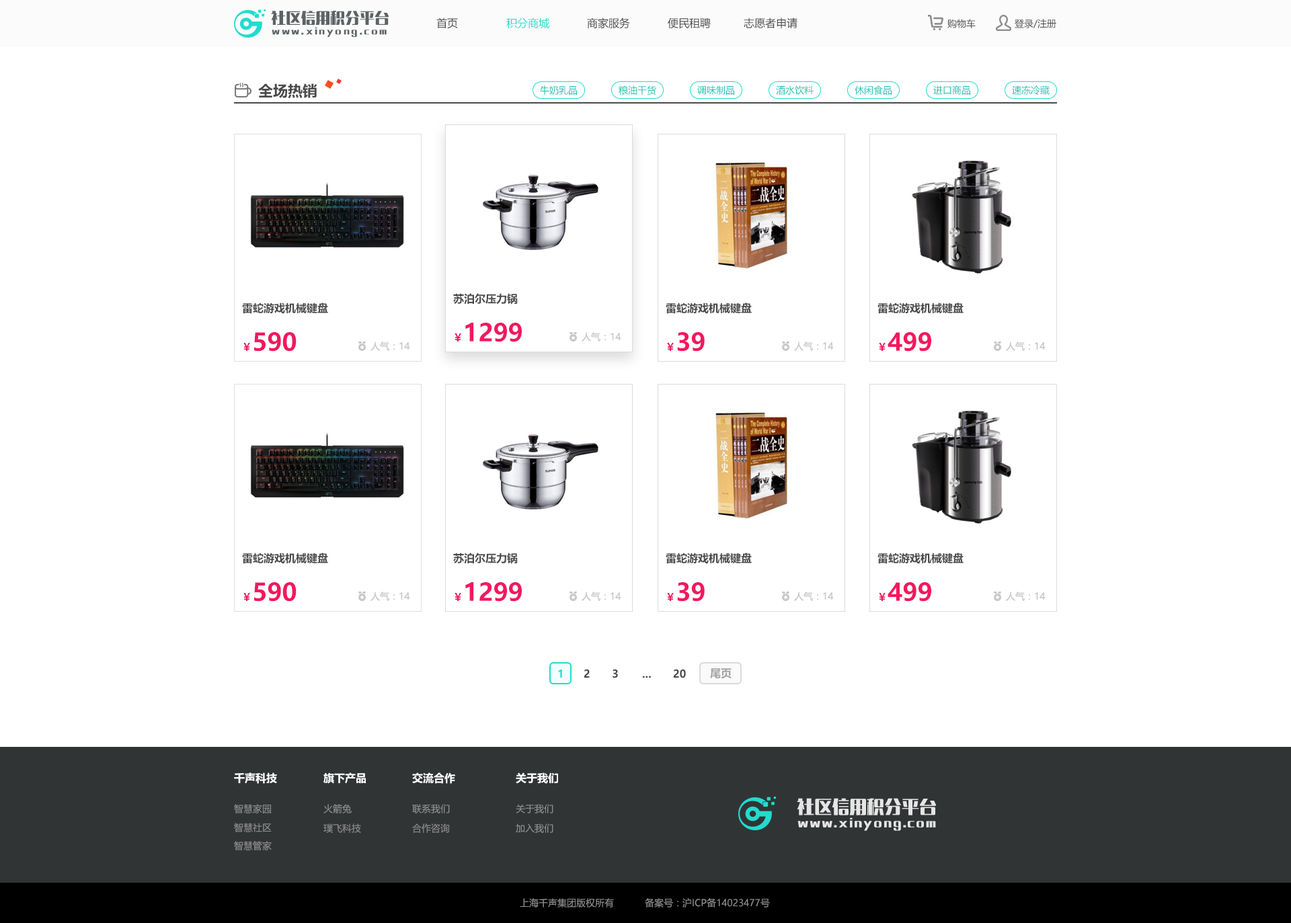
<style>
.page{position:relative;width:1291px;height:923px;background:#ffffff}
.page>*{position:absolute;margin:0}
.t1{font:14.8px "MFLangQian_Noncommercial-Bold";color:#5c6365}
.t2{font:10.8px "MicrosoftYaHei";color:#4a4a4a}
.t3{font:10.8px "MicrosoftYaHei";color:#21dccd}
.t4{font:8.1px "MFLangQian_Noncommercial-Bold";letter-spacing:0.22em;color:#5c6365}
.t5{font:9.4px "MicrosoftYaHei";color:#4a4a4a}
.t6{font:14.8px "MicrosoftYaHei-Bold";color:#4a4a4a}
.t7{font:9.4px "MicrosoftYaHei";color:#13c0b2}
.t8{font:10.8px "MicrosoftYaHei-Bold";color:#4a4a4a}
.t9{font:24.2px "MicrosoftYaHei-Bold";color:#f21860}
.t10{font:9.4px "MicrosoftYaHei";color:#c7c5c5}
.t11{font:10.8px "MicrosoftYaHei-Bold";color:#f21860}
.t12{font:10.8px "MicrosoftYaHei-Bold";color:#21dccd}
.t13{font:10.8px "MicrosoftYaHei-Bold";color:#a4a4a4}
.t14{font:10.8px "MicrosoftYaHei-Bold";color:#ffffff}
.t15{font:9.4px "MicrosoftYaHei";color:#929292}
.t16{font:17.5px "MFLangQian_Noncommercial-Bold";color:#e5e5e5}
.t17{font:10.8px "MFLangQian_Noncommercial-Bold";letter-spacing:0.12em;color:#e5e5e5}
</style>
<div class="page">
<p class="t1" style="left:271px;top:11px;width:118px;height:14px">社区信用积分平台</p>
<p class="t2" style="left:436px;top:17px;width:22px;height:12px">首页</p>
<p class="t3" style="left:506px;top:17px;width:43px;height:12px">积分商城</p>
<p class="t2" style="left:587px;top:17px;width:43px;height:12px">商家服务</p>
<p class="t2" style="left:668px;top:17px;width:43px;height:12px">便民租聘</p>
<p class="t2" style="left:744px;top:17px;width:54px;height:12px">志愿者申请</p>
<p class="t4" style="left:272px;top:27px;width:115px;height:10px">www.xinyong.com</p>
<p class="t5" style="left:948px;top:19px;width:28px;height:9px">购物车</p>
<p class="t5" style="left:1015px;top:19px;width:42px;height:9px">登录/注册</p>
<p class="t6" style="left:258px;top:83px;width:59px;height:16px">全场热销</p>
<p class="t7" style="left:540px;top:85px;width:37px;height:10px">牛奶乳品</p>
<p class="t7" style="left:619px;top:85px;width:37px;height:10px">粮油干货</p>
<p class="t7" style="left:697px;top:85px;width:37px;height:10px">调味制品</p>
<p class="t7" style="left:776px;top:85px;width:38px;height:10px">酒水饮料</p>
<p class="t7" style="left:855px;top:85px;width:37px;height:10px">休闲食品</p>
<p class="t7" style="left:934px;top:85px;width:37px;height:10px">进口商品</p>
<p class="t7" style="left:1012px;top:85px;width:38px;height:10px">速冻冷藏</p>
<p class="t8" style="left:453px;top:293px;width:65px;height:12px">苏泊尔压力锅</p>
<p class="t8" style="left:242px;top:303px;width:86px;height:11px">雷蛇游戏机械键盘</p>
<p class="t8" style="left:666px;top:303px;width:86px;height:11px">雷蛇游戏机械键盘</p>
<p class="t8" style="left:878px;top:303px;width:86px;height:11px">雷蛇游戏机械键盘</p>
<p class="t9" style="left:465px;top:323px;width:57px;height:19px">1299</p>
<p class="t9" style="left:254px;top:332px;width:43px;height:20px">590</p>
<p class="t10" style="left:371px;top:342px;width:39px;height:9px">人气：14</p>
<p class="t11" style="left:455px;top:334px;width:6px;height:8px">￥</p>
<p class="t10" style="left:582px;top:332px;width:39px;height:10px">人气：14</p>
<p class="t9" style="left:677px;top:332px;width:28px;height:20px">39</p>
<p class="t10" style="left:794px;top:342px;width:40px;height:9px">人气：14</p>
<p class="t9" style="left:888px;top:332px;width:43px;height:20px">499</p>
<p class="t10" style="left:1006px;top:342px;width:40px;height:9px">人气：14</p>
<p class="t11" style="left:243px;top:343px;width:7px;height:8px">￥</p>
<p class="t11" style="left:667px;top:343px;width:7px;height:8px">￥</p>
<p class="t11" style="left:879px;top:343px;width:7px;height:8px">￥</p>
<p class="t8" style="left:242px;top:553px;width:86px;height:11px">雷蛇游戏机械键盘</p>
<p class="t8" style="left:453px;top:553px;width:65px;height:11px">苏泊尔压力锅</p>
<p class="t8" style="left:666px;top:553px;width:86px;height:11px">雷蛇游戏机械键盘</p>
<p class="t8" style="left:878px;top:553px;width:86px;height:11px">雷蛇游戏机械键盘</p>
<p class="t11" style="left:243px;top:593px;width:7px;height:8px">￥</p>
<p class="t9" style="left:254px;top:582px;width:43px;height:20px">590</p>
<p class="t10" style="left:371px;top:592px;width:39px;height:9px">人气：14</p>
<p class="t11" style="left:455px;top:593px;width:6px;height:8px">￥</p>
<p class="t9" style="left:465px;top:582px;width:57px;height:20px">1299</p>
<p class="t10" style="left:582px;top:592px;width:39px;height:9px">人气：14</p>
<p class="t11" style="left:667px;top:593px;width:7px;height:8px">￥</p>
<p class="t9" style="left:677px;top:582px;width:28px;height:20px">39</p>
<p class="t10" style="left:794px;top:592px;width:40px;height:9px">人气：14</p>
<p class="t11" style="left:879px;top:593px;width:7px;height:8px">￥</p>
<p class="t9" style="left:888px;top:582px;width:43px;height:20px">499</p>
<p class="t10" style="left:1006px;top:592px;width:40px;height:9px">人气：14</p>
<p class="t12" style="left:558px;top:669px;width:4px;height:9px">1</p>
<p class="t8" style="left:584px;top:669px;width:6px;height:9px">2</p>
<p class="t8" style="left:613px;top:669px;width:5px;height:10px">3</p>
<p class="t8" style="left:642px;top:676px;width:9px;height:3px">...</p>
<p class="t8" style="left:673px;top:669px;width:13px;height:10px">20</p>
<p class="t13" style="left:710px;top:669px;width:22px;height:10px">尾页</p>
<p class="t14" style="left:234px;top:773px;width:43px;height:11px">千声科技</p>
<p class="t14" style="left:324px;top:773px;width:42px;height:11px">旗下产品</p>
<p class="t14" style="left:412px;top:773px;width:43px;height:11px">交流合作</p>
<p class="t14" style="left:516px;top:773px;width:42px;height:11px">关于我们</p>
<p class="t15" style="left:234px;top:804px;width:37px;height:10px">智慧家园</p>
<p class="t15" style="left:324px;top:804px;width:28px;height:10px">火箭兔</p>
<p class="t15" style="left:412px;top:804px;width:38px;height:10px">联系我们</p>
<p class="t15" style="left:516px;top:804px;width:38px;height:10px">关于我们</p>
<p class="t16" style="left:797px;top:798px;width:139px;height:18px">社区信用积分平台</p>
<p class="t17" style="left:798px;top:818px;width:138px;height:13px">www.xinyong.com</p>
<p class="t15" style="left:234px;top:823px;width:38px;height:10px">智慧社区</p>
<p class="t15" style="left:324px;top:824px;width:37px;height:9px">璞飞科技</p>
<p class="t15" style="left:412px;top:824px;width:38px;height:9px">合作咨询</p>
<p class="t15" style="left:516px;top:824px;width:38px;height:9px">加入我们</p>
<p class="t15" style="left:234px;top:841px;width:38px;height:10px">智慧管家</p>
<p class="t15" style="left:520px;top:899px;width:94px;height:9px">上海千声集团版权所有</p>
<p class="t15" style="left:645px;top:899px;width:125px;height:9px">备案号：沪ICP备14023477号</p>
</div>
